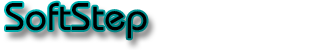
<style>
.page{position:relative;width:318px;height:50px;background:#ffffff}
.page>*{position:absolute;margin:0}
.t1{font:40px "Opal";color:#000000}
</style>
<div class="page">
<p class="t1" style="left:6px;top:2px;width:141px;height:37px">SoftStep</p>
</div>
